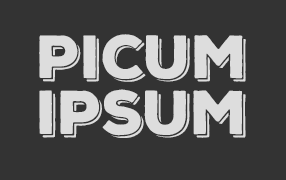
<style>
.page{position:relative;width:286px;height:180px;background:#333333}
.page>*{position:absolute;margin:0}
.t1{font:59px/56px "NexaRustSans-BlackShadow";color:#dddddd}
.t2{font:60px/56px "NexaRustSans-BlackShadow";color:#dddddd}
</style>
<div class="page">
<p class="t1" style="left:39px;top:34px;width:207px;height:104px;text-align:center">Picum<br><span class="t2">Ipsum</span></p>
</div>
